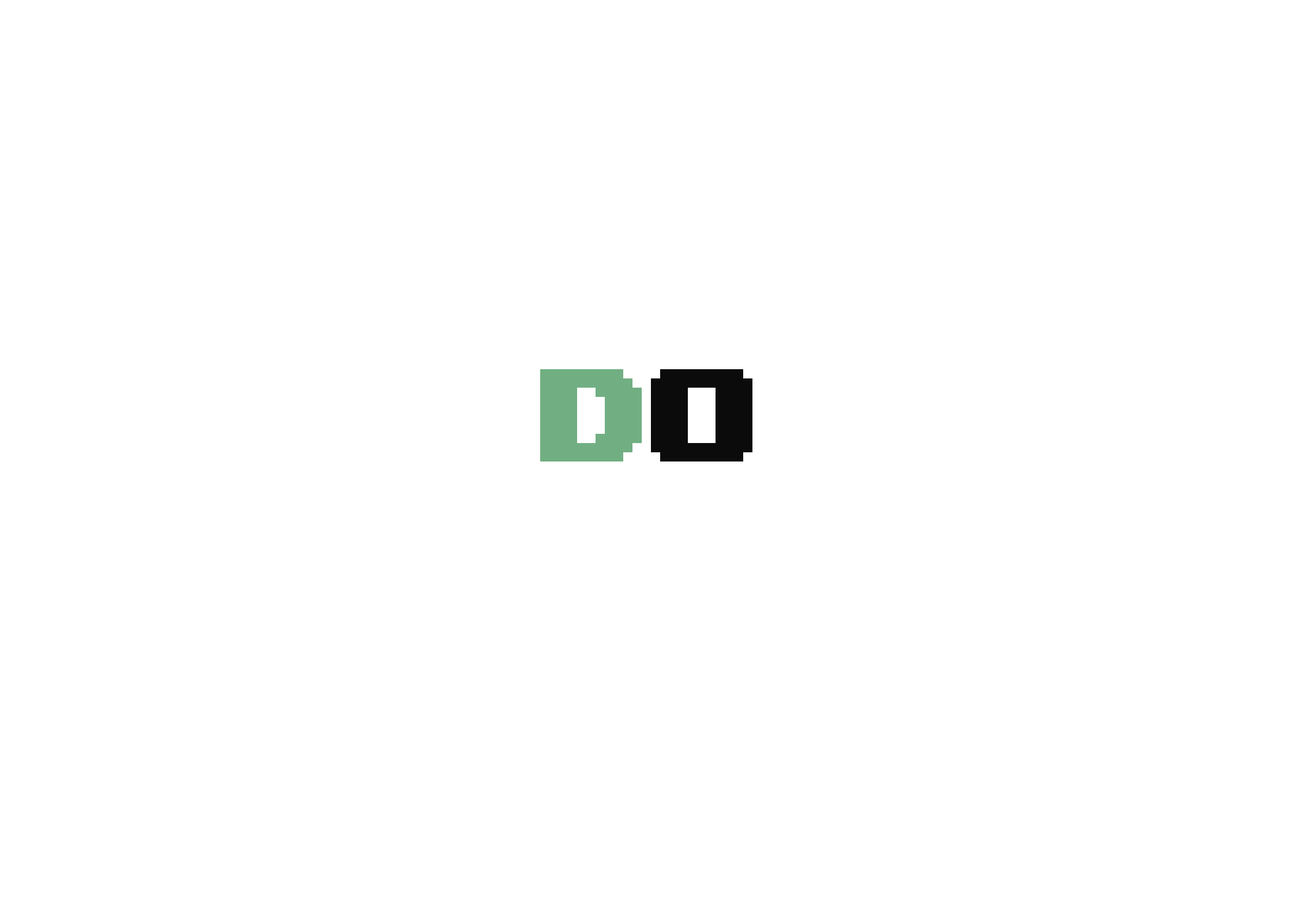
<style>
.page{position:relative;width:1292px;height:923px;background:#ffffff}
.page>*{position:absolute;margin:0}
.t1{font:184.6px "UpheavalPro-Regular";color:#71af83}
.t2{font:184.6px "UpheavalPro-Regular";color:#0b0b0b}
</style>
<div class="page">
<p class="t1" style="left:540px;top:369px;width:212px;height:92px">D<span class="t2">O</span></p>
</div>
